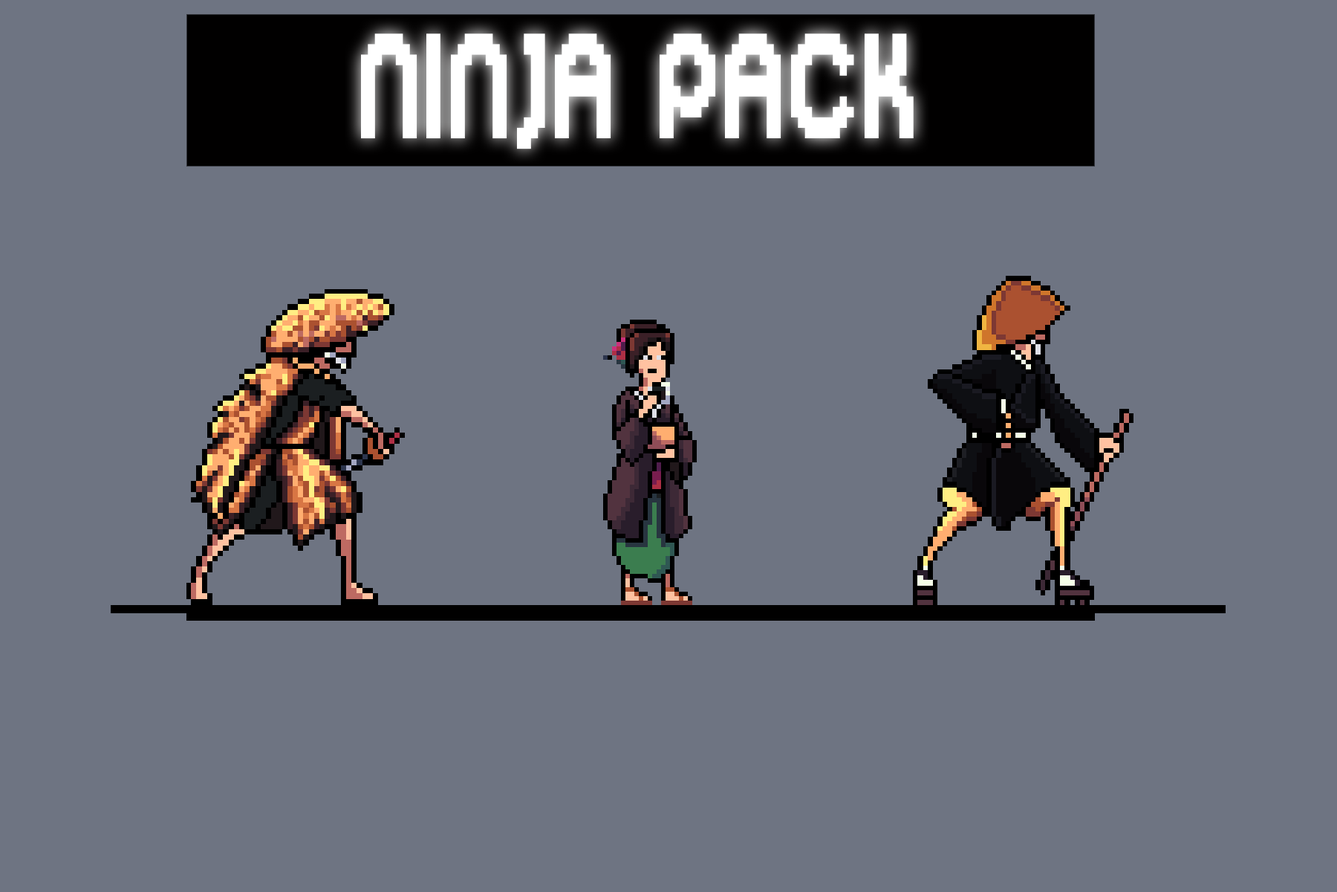
<style>
.page{position:relative;width:1337px;height:892px;background:#6e7482}
.page>*{position:absolute;margin:0}
.t1{font:167.2px "DigitalDisco";letter-spacing:0.03em;color:#ffffff;scale:0.67 1}
</style>
<div class="page">
<p class="t1" style="left:361px;top:33px;width:553px;height:116px">NINJA PACK</p>
</div>
